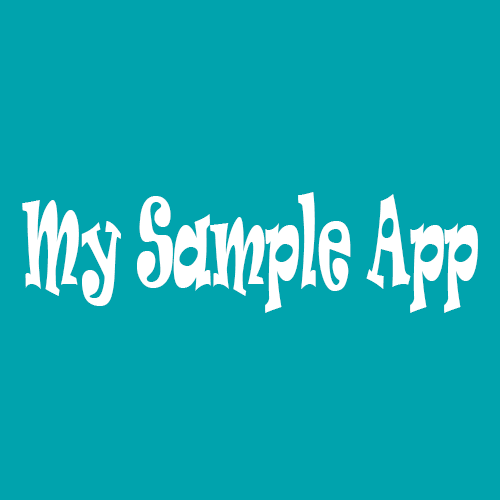
<style>
.page{position:relative;width:500px;height:500px;background:#00a3ad}
.page>*{position:absolute;margin:0}
.t1{font:113.7px "Ravie";color:#ffffff;scale:0.4 1}
</style>
<div class="page">
<p class="t1" style="left:22px;top:192px;width:456px;height:121px">My Sample App</p>
</div>
